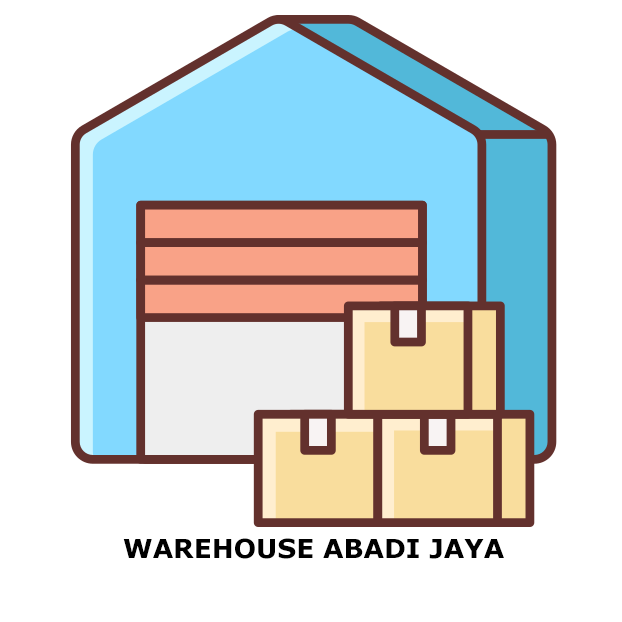
<style>
.page{position:relative;width:622px;height:622px;background:#ffffff}
.page>*{position:absolute;margin:0}
.t1{font:26.3px "Verdana-Bold";color:#000000}
</style>
<div class="page">
<p class="t1" style="left:123px;top:538px;width:381px;height:21px">WAREHOUSE ABADI JAYA</p>
</div>
